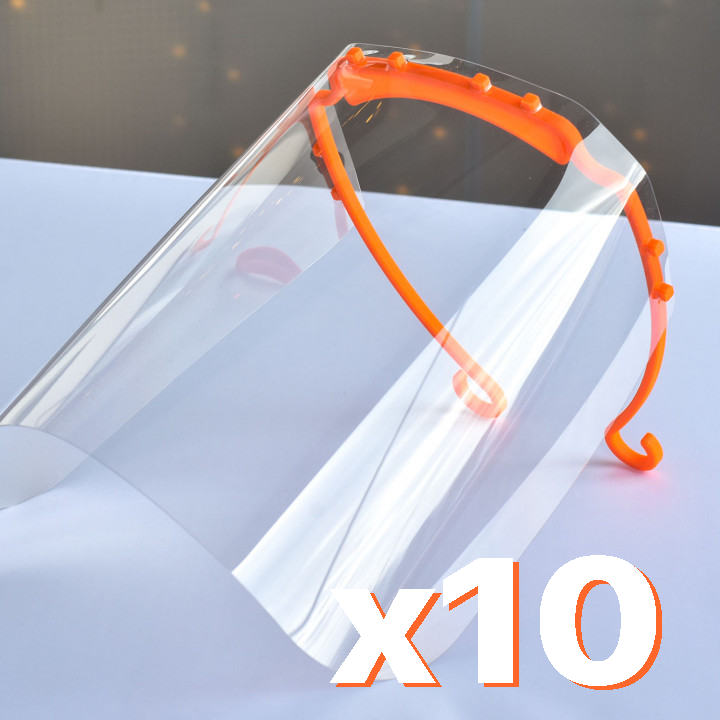
<style>
.page{position:relative;width:720px;height:720px}
.page>*{position:absolute;margin:0}
.t1{font:176.7px "SFProDisplay-Heavy";letter-spacing:-0.01em;color:#ffffff;scale:1.11 1}
</style>
<div class="page">
<p class="t1" style="left:330px;top:555px;width:326px;height:131px">x10</p>
</div>
